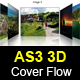
<style>
.page{position:relative;width:80px;height:80px;background:#000000}
.page>*{position:absolute;margin:0}
.t1{font:15px "Arial-BoldMT";color:#fffc00}
.t2{font:12px "ArialMT";color:#ffffff}
</style>
<div class="page">
<p class="t1" style="left:14px;top:51px;width:52px;height:11px">AS3 3D</p>
<p class="t2" style="left:11px;top:67px;width:61px;height:9px">Cover Flow</p>
</div>
